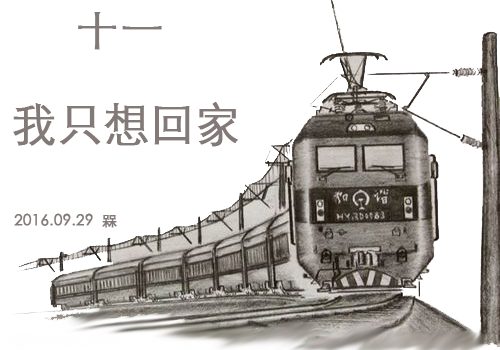
<style>
.page{position:relative;width:500px;height:350px;background:#ffffff}
.page>*{position:absolute;margin:0}
.t1{font:41.4px "STHeitiSC-Light";color:#837977;font-weight:bold;scale:1.05 1}
.t2{font:46.5px "STHeitiSC-Light";color:#837977;font-weight:bold;scale:0.96 1}
.t3{font:14.8px "STHeitiSC-Light";color:#837977;font-weight:bold}
</style>
<div class="page">
<p class="t1" style="left:78px;top:12px;width:84px;height:38px">十一</p>
<p class="t2" style="left:13px;top:102px;width:225px;height:45px">我只想回家</p>
<p class="t3" style="left:14px;top:213px;width:103px;height:15px">2016.09.29  槑</p>
</div>
